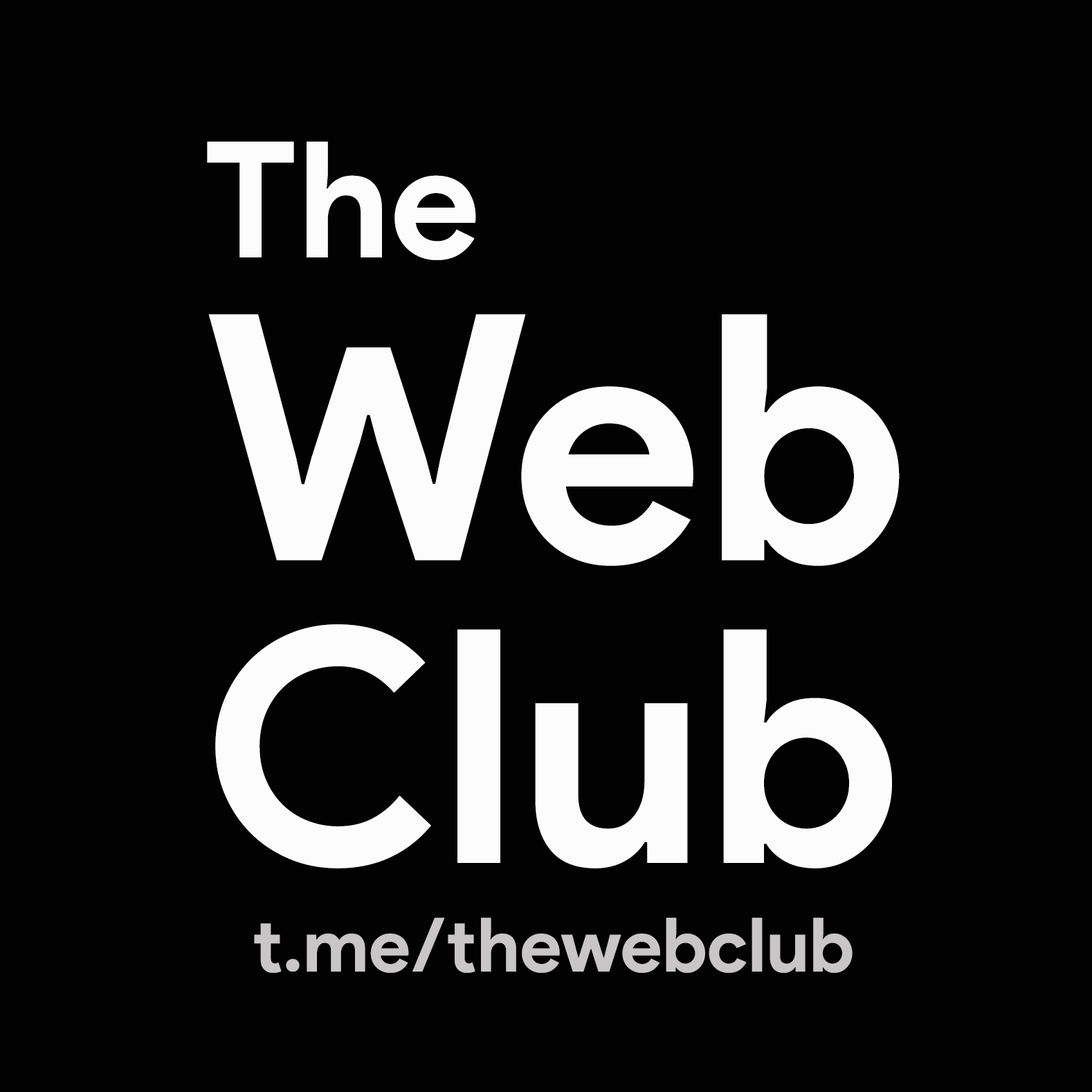
<style>
.page{position:relative;width:1092px;height:1092px;background:#030202}
.page>*{position:absolute;margin:0}
.t1{font:325.8px/302.8px "ProductSans-Bold";color:#fdfcfc}
.t2{font:161.5px/302.8px "ProductSans-Bold";color:#fdfcfc}
.t3{font:343.1px/302.8px "ProductSans-Bold";color:#fdfcfc}
.t4{font:75px "ProductSans-Bold";color:#c8c6c6}
</style>
<div class="page">
<p class="t1" style="left:207px;top:141px;width:693px;height:727px"><span class="t2">The<br></span><span class="t3">Web<br></span>Club</p>
<p class="t4" style="left:254px;top:918px;width:599px;height:55px">t.me/thewebclub</p>
</div>
